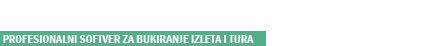
<style>
.page{position:relative;width:430px;height:46px;background:#ffffff}
.page>*{position:absolute;margin:0}
.t1{font:12px "FranklinGothic-DemiCond";color:#ffffff}
</style>
<div class="page">
<p class="t1" style="left:3px;top:35px;width:251px;height:8px">PROFESIONALNI SOFTVER ZA BUKIRANJE IZLETA I TURA</p>
</div>
